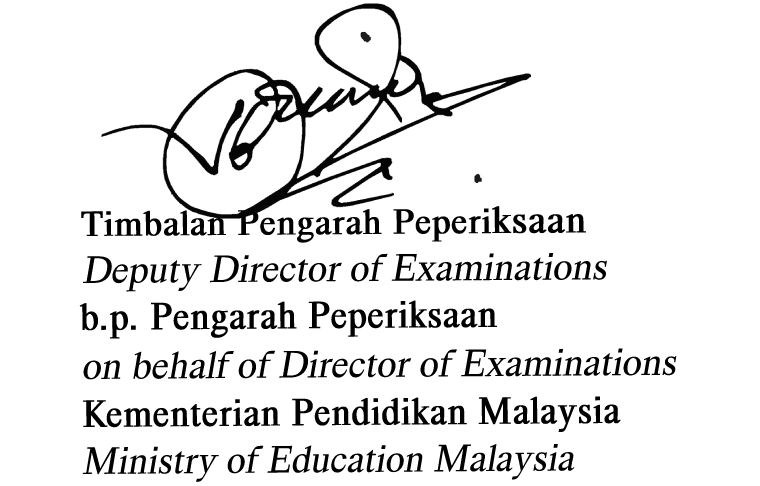
<style>
.page{position:relative;width:760px;height:486px;background:#ffffff}
.page>*{position:absolute;margin:0}
.t1{font:37.2px "HappyTimesattheIKOB-Regular";color:#000000;font-weight:bold}
.t2{font:40.3px "HappyTimesattheIKOB-Regular";color:#000000;font-weight:bold}
.t3{font:40.3px "HappyTimesattheIKOB-Regular";color:#000000;font-style:italic}
.t4{font:40.3px "HappyTimesattheIKOB-Regular";color:#000000;font-weight:bold;scale:0.92 1}
.t5{font:40.3px "HappyTimesattheIKOB-Regular";color:#000000;font-style:italic;scale:0.96 1}
</style>
<div class="page">
<p class="t1" style="left:81px;top:206px;width:505px;height:37px">Timbalan Pengarah Peperi<span class="t2">ksaan</span></p>
<p class="t3" style="left:83px;top:253px;width:524px;height:39px">Deputy Director of Examinations</p>
<p class="t4" style="left:79px;top:300px;width:418px;height:39px">b.p. Pengarah Peperiksaan</p>
<p class="t3" style="left:82px;top:348px;width:595px;height:32px">on behalf of Director of Examinations</p>
<p class="t4" style="left:83px;top:396px;width:538px;height:36px">Kementerian Pendidikan Malaysia</p>
<p class="t5" style="left:82px;top:443px;width:493px;height:39px">Ministry of Education Malaysia</p>
</div>
